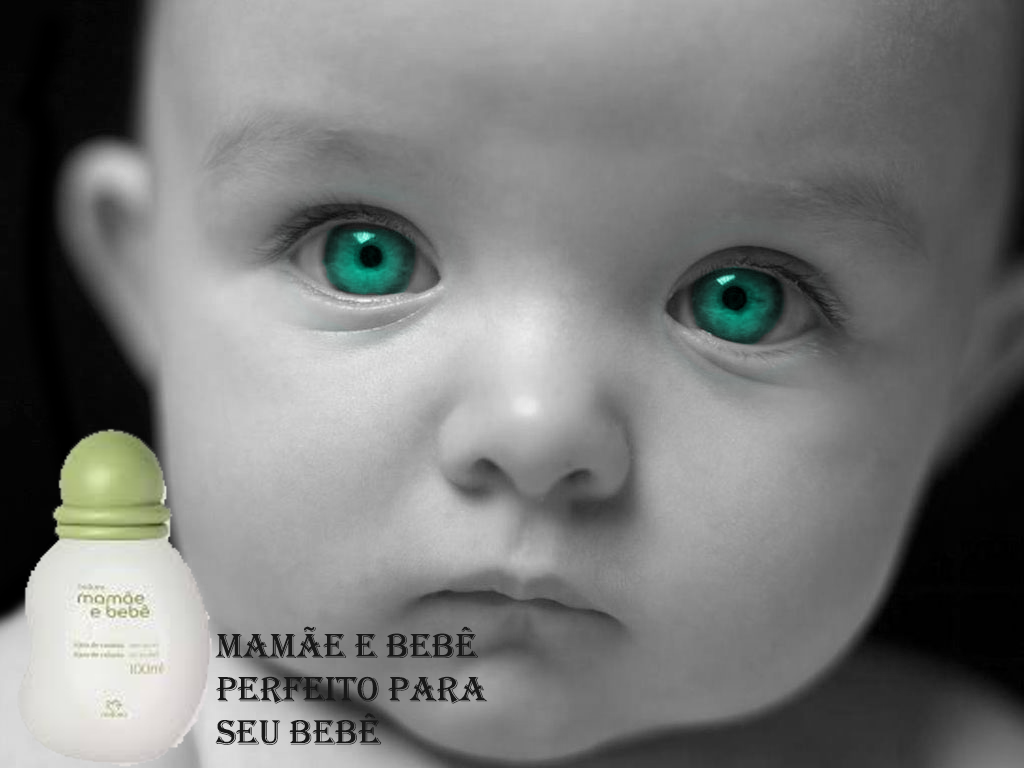
<style>
.page{position:relative;width:1024px;height:768px}
.page>*{position:absolute;margin:0}
.t1{font:36px "Algerian";color:#181818}
</style>
<div class="page">
<p class="t1" style="left:215px;top:626px;width:273px;height:119px">mamãe e bebÊ<br>perfeito para<br>seu bebÊ</p>
</div>
